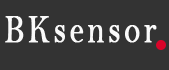
<style>
.page{position:relative;width:169px;height:70px;background:#333333}
.page>*{position:absolute;margin:0}
.t1{font:41.3px "BellMT";letter-spacing:0.1em;color:#fafafa;font-weight:bold;scale:0.76 1}
</style>
<div class="page">
<p class="t1" style="left:5px;top:16px;width:152px;height:27px">BKsensor</p>
</div>
